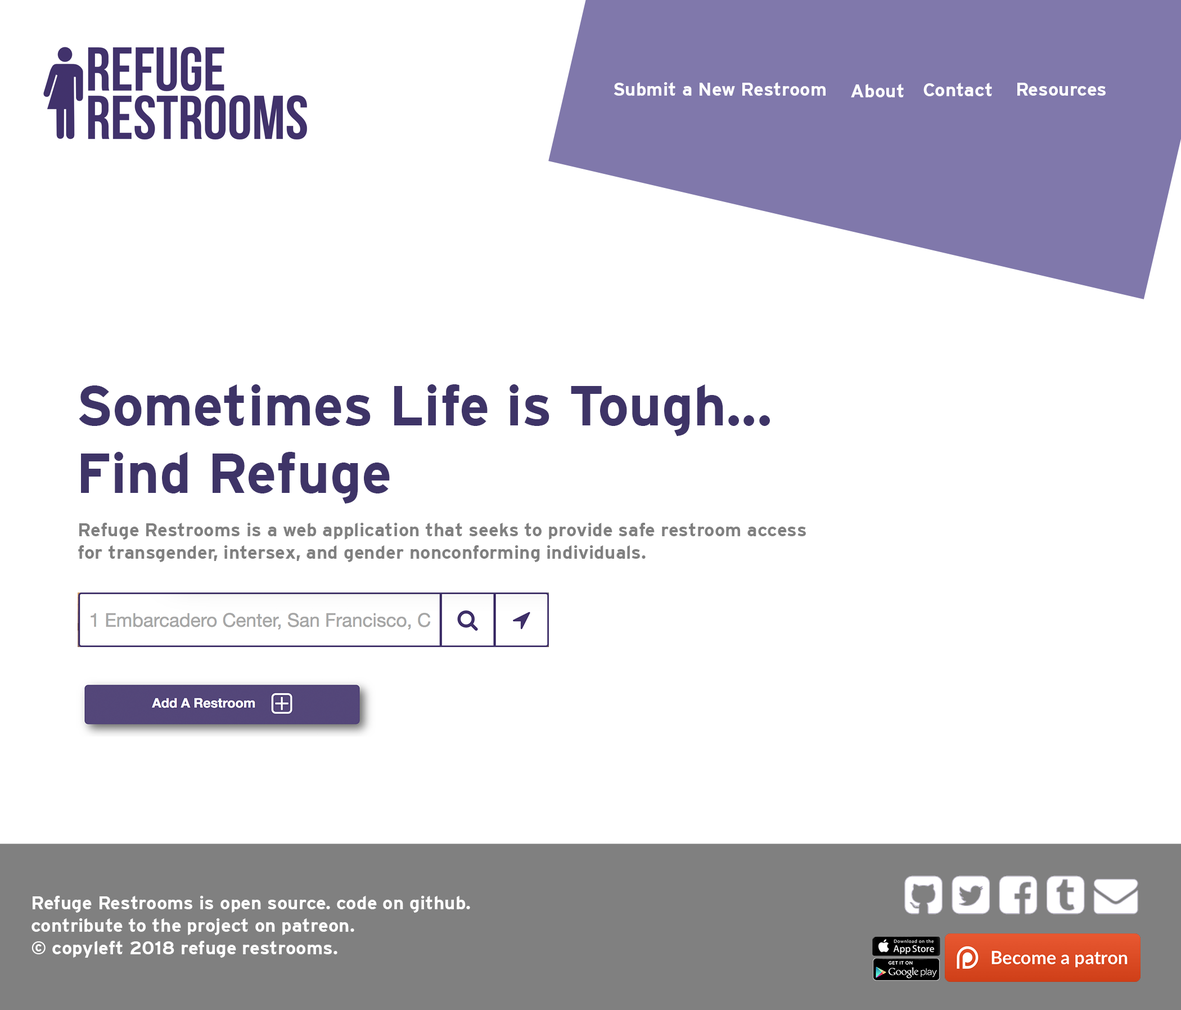
<style>
.page{position:relative;width:1181px;height:1010px;background:#ffffff}
.page>*{position:absolute;margin:0}
.t1{font:18.7px "Interstate-Bold";color:#ffffff}
.t2{font:56.2px "Interstate-Bold";color:#3e3467}
.t3{font:18.7px "Interstate-Bold";color:#808080}
</style>
<div class="page">
<p class="t1" style="left:614px;top:82px;width:212px;height:14px">Submit a New Restroom</p>
<p class="t1" style="left:851px;top:84px;width:53px;height:13px">About</p>
<p class="t1" style="left:924px;top:83px;width:68px;height:13px">Contact</p>
<p class="t1" style="left:1017px;top:83px;width:89px;height:13px">Resources</p>
<p class="t2" style="left:79px;top:384px;width:691px;height:119px">Sometimes Life is Tough... <br>Find Refuge</p>
<p class="t3" style="left:78px;top:523px;width:728px;height:39px">Refuge Restrooms is a web application that seeks to provide safe restroom access<br>for transgender, intersex, and gender nonconforming individuals.</p>
<p class="t1" style="left:31px;top:895px;width:439px;height:62px">Refuge Restrooms is open source. code on github. <br>contribute to the project on patreon. <br>© copyleft 2018 refuge restrooms.</p>
</div>
